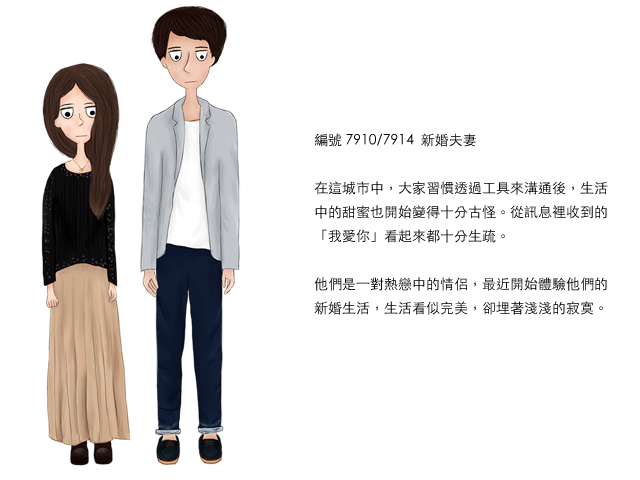
<style>
.page{position:relative;width:640px;height:480px;background:#ffffff}
.page>*{position:absolute;margin:0}
.t1{font:14px/24px "STHeitiTC-Light";color:#000000}
</style>
<div class="page">
<p class="t1" style="left:314px;top:133px;width:294px;height:182px">編號 7910/7914  新婚夫妻<br><br>在這城市中，大家習慣透過工具來溝通後，生活中的甜蜜也開始變得十分古怪。從訊息裡收到的「我愛你」看起來都十分生疏。<br><br>他們是一對熱戀中的情侶，最近開始體驗他們的新婚生活，生活看似完美，卻埋著淺淺的寂寞。</p>
</div>
